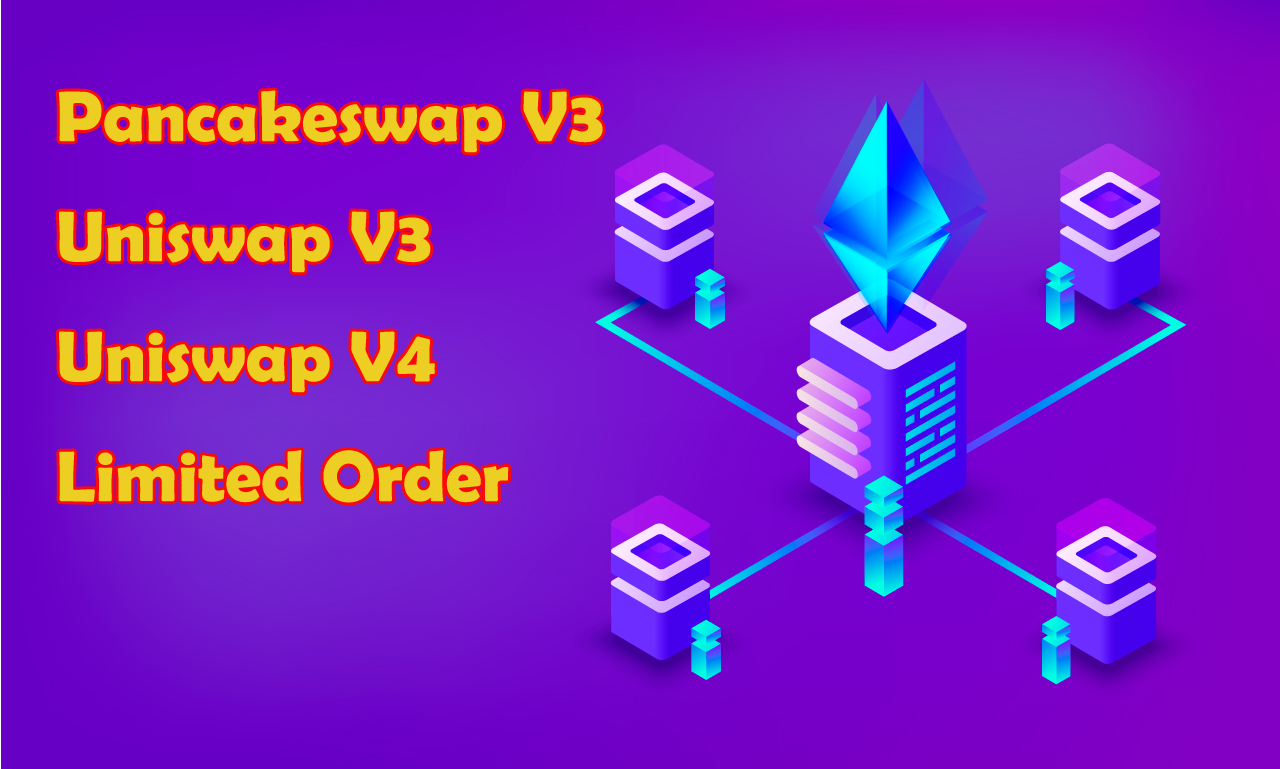
<style>
.page{position:relative;width:1280px;height:769px}
.page>*{position:absolute;margin:0}
.t1{font:72px/120px "BerlinSansFBDemi-Bold";color:#edce22}
</style>
<div class="page">
<p class="t1" style="left:58px;top:90px;width:545px;height:413px">Pancakeswap V3<br>Uniswap V3<br>Uniswap V4<br>Limited Order</p>
</div>
